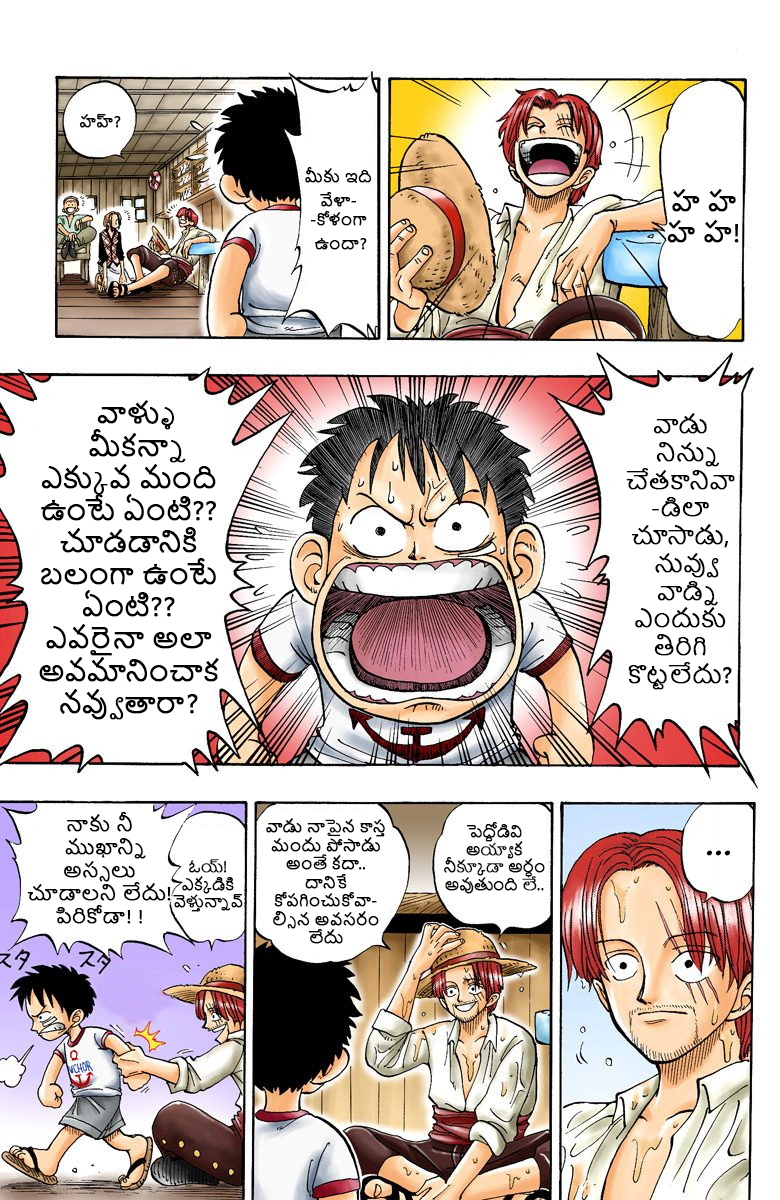
<style>
.page{position:relative;width:780px;height:1200px;background:#ffffff}
.page>*{position:absolute;margin:0}
.t1{font:15.3px "NirmalaUI";color:#000000;font-weight:bold}
.t2{font:25.8px "NirmalaUI";color:#000000;font-weight:bold}
.t3{font:26.8px "NirmalaUI";color:#000000;font-weight:bold}
.t4{font:23.1px "NirmalaUI";color:#000000;font-weight:bold}
.t5{font:19.1px "NirmalaUI";color:#000000;font-weight:bold}
.t6{font:15.4px "NirmalaUI";color:#000000;font-weight:bold}
.t7{font:14.7px "NirmalaUI";color:#000000;font-weight:bold}
</style>
<div class="page">
<p class="t1" style="left:79px;top:114px;width:42px;height:14px">హహ్?</p>
<p class="t1" style="left:305px;top:167px;width:67px;height:83px;text-align:center">మీకు ఇది <br><br>వేళా-<br>-కోళంగా<br><br> ఉందా?</p>
<p class="t2" style="left:667px;top:189px;width:72px;height:54px;text-align:center">హ హ<br>హ హ!</p>
<p class="t3" style="left:39px;top:400px;width:180px;height:320px;text-align:center">వాళ్ళు మీకన్నా ఎక్కువ మంది ఉంటే ఏంటి?? చూడడానికి బలంగా ఉంటే ఏంటి?? ఎవరైనా అలా అవమానించాక  నవ్వుతారా? నువ్వు సముద్రపు దొంగలందరికీ సిగ్గు చేటు</p>
<p class="t4" style="left:626px;top:413px;width:109px;height:277px;text-align:center">వాడు నిన్ను చేతకానివా-డిలా చూసాడు, నువ్వు వాడ్ని ఎందుకు<br>తిరిగి  కొట్టలేదు?</p>
<p class="t5" style="left:27px;top:812px;width:144px;height:112px;text-align:center">నాకు నీ ముఖాన్ని  అస్సలు చూడాలని లేదు! పిరికోడా! !</p>
<p class="t6" style="left:266px;top:818px;width:119px;height:126px;text-align:center">వాడు నాపైన కాస్త మందు పోసాడు అంతే కదా.. దానికే కోపగించుకోవా-ల్సిన అవసరం లేదు</p>
<p class="t7" style="left:444px;top:822px;width:101px;height:72px;text-align:center">పెద్దోడివి అయ్యాక నీక్కూడా అర్ధం అవుతుంది లే..</p>
<p class="t7" style="left:173px;top:859px;width:70px;height:53px;text-align:center">ఓయ్! ఎక్కడికి  వెళ్తున్నావ్</p>
</div>
